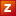
<style>
.page{position:relative;width:16px;height:16px}
.page>*{position:absolute;margin:0}
.t1{font:11.5px "Ubuntu-Bold";color:#ffffff}
</style>
<div class="page">
<p class="t1" style="left:4px;top:4px;width:7px;height:8px">Z</p>
</div>
